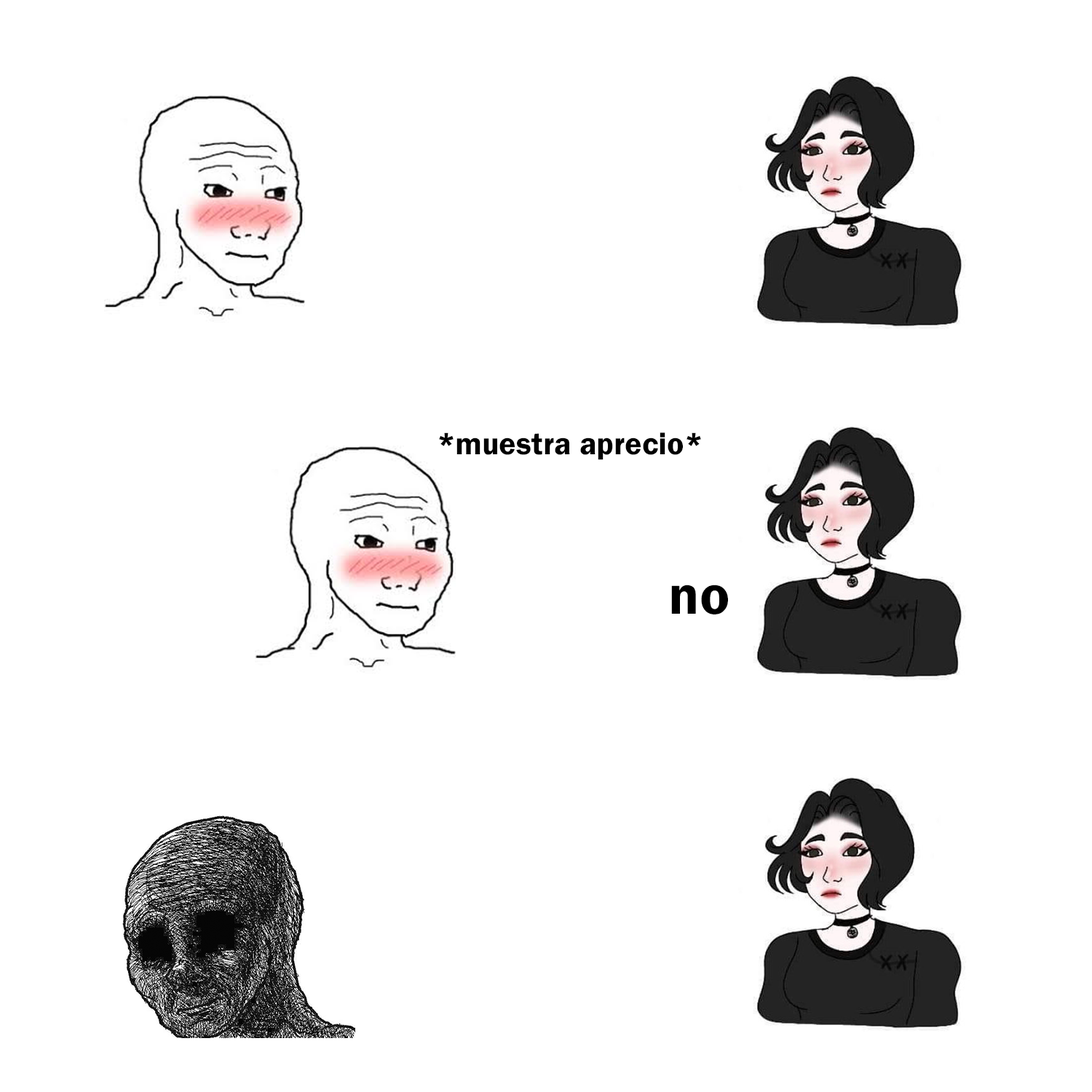
<style>
.page{position:relative;width:1092px;height:1092px;background:#ffffff}
.page>*{position:absolute;margin:0}
.t1{font:32px "FranklinGothic-Demi";color:#000000}
.t2{font:56.4px "FranklinGothic-Demi";color:#000000}
</style>
<div class="page">
<p class="t1" style="left:439px;top:432px;width:262px;height:28px">*muestra aprecio*</p>
<p class="t2" style="left:671px;top:585px;width:57px;height:29px">no</p>
</div>
